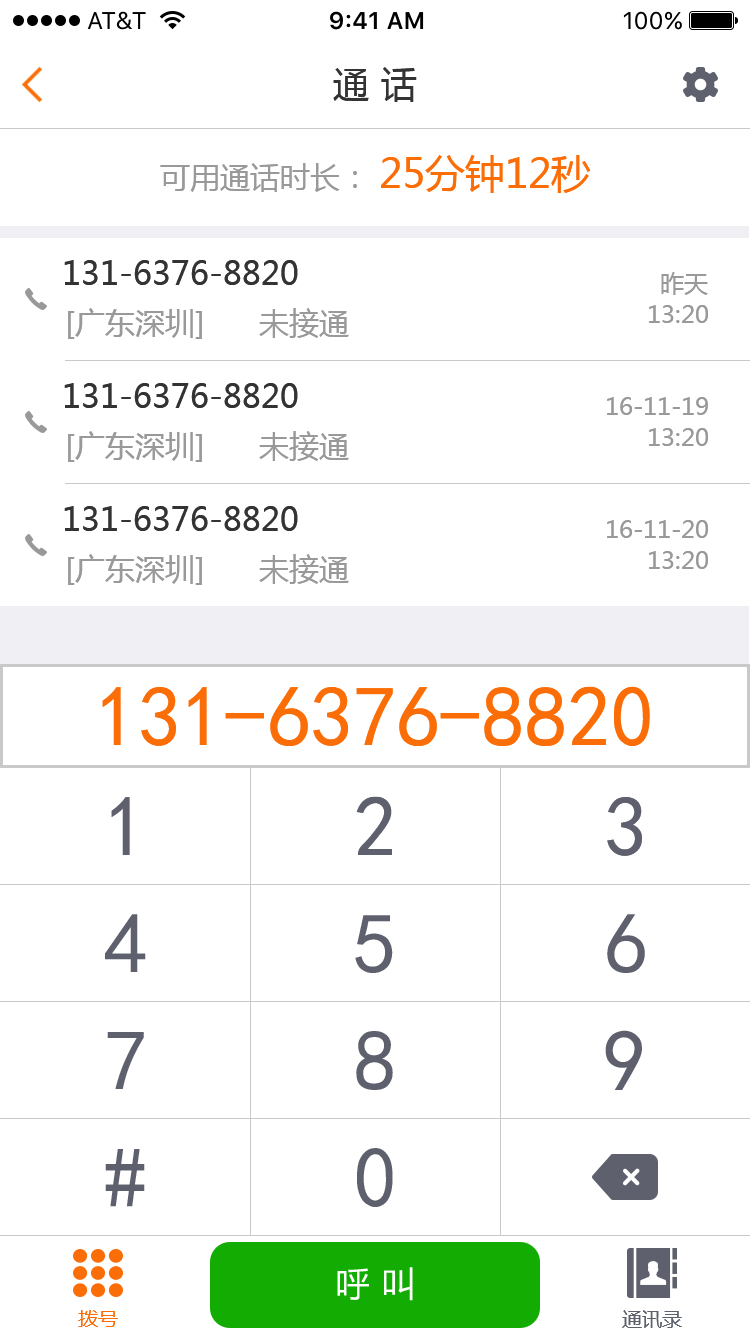
<style>
.page{position:relative;width:750px;height:1334px;background:#ffffff}
.page>*{position:absolute;margin:0}
.t1{font:36px "MicrosoftYaHei";color:#333333}
.t2{font:30px "MicrosoftYaHei";color:#999999}
.t3{font:40px "MicrosoftYaHei";color:#fb6d07}
.t4{font:32px "MicrosoftYaHei";color:#333333}
.t5{font:24px "MicrosoftYaHei";color:#999999}
.t6{font:86px "SimHei";color:#fb6d07}
.t7{font:86px "SimHei";color:#5e616d}
.t8{font:86.3px "SimHei";color:#5e616d}
.t9{font:85.8px "SimHei";color:#5e616d}
.t10{font:34.8px "MicrosoftYaHei";color:#ffffff}
.t11{font:20px "MicrosoftYaHei";color:#fb6d07}
.t12{font:20px "MicrosoftYaHei";color:#5e616d}
</style>
<div class="page">
<p class="t1" style="left:333px;top:67px;width:84px;height:35px">通 话</p>
<p class="t2" style="left:160px;top:155px;width:431px;height:38px">可用通话时长：<span class="t3">25分钟12秒</span></p>
<p class="t4" style="left:64px;top:260px;width:234px;height:25px">131-6376-8820</p>
<p class="t5" style="left:661px;top:272px;width:47px;height:23px">昨天</p>
<p class="t5" style="left:649px;top:305px;width:59px;height:18px">13:20</p>
<p class="t2" style="left:68px;top:308px;width:281px;height:31px">[广东深圳]      未接通</p>
<p class="t4" style="left:64px;top:383px;width:234px;height:25px">131-6376-8820</p>
<p class="t5" style="left:607px;top:397px;width:101px;height:18px">16-11-19</p>
<p class="t2" style="left:68px;top:431px;width:281px;height:31px">[广东深圳]      未接通</p>
<p class="t5" style="left:649px;top:428px;width:59px;height:18px">13:20</p>
<p class="t4" style="left:64px;top:506px;width:234px;height:25px">131-6376-8820</p>
<p class="t5" style="left:607px;top:520px;width:101px;height:18px">16-11-20</p>
<p class="t2" style="left:68px;top:554px;width:281px;height:31px">[广东深圳]      未接通</p>
<p class="t5" style="left:649px;top:551px;width:59px;height:18px">13:20</p>
<p class="t6" style="left:102px;top:686px;width:548px;height:60px">131-6376-8820</p>
<p class="t7" style="left:111px;top:797px;width:19px;height:58px">1</p>
<p class="t7" style="left:356px;top:796px;width:36px;height:59px">2</p>
<p class="t7" style="left:607px;top:797px;width:35px;height:59px">3</p>
<p class="t7" style="left:105px;top:914px;width:41px;height:58px">4</p>
<p class="t7" style="left:355px;top:915px;width:38px;height:58px">5</p>
<p class="t7" style="left:607px;top:914px;width:38px;height:59px">6</p>
<p class="t8" style="left:107px;top:1032px;width:37px;height:57px">7</p>
<p class="t8" style="left:356px;top:1031px;width:37px;height:59px">8</p>
<p class="t8" style="left:605px;top:1030px;width:37px;height:60px">9</p>
<p class="t9" style="left:105px;top:1149px;width:40px;height:58px">#</p>
<p class="t9" style="left:357px;top:1148px;width:36px;height:59px">0</p>
<p class="t10" style="left:337px;top:1267px;width:76px;height:34px">呼 叫</p>
<p class="t11" style="left:78px;top:1310px;width:40px;height:17px">拨号</p>
<p class="t12" style="left:622px;top:1310px;width:60px;height:18px">通讯录</p>
</div>
